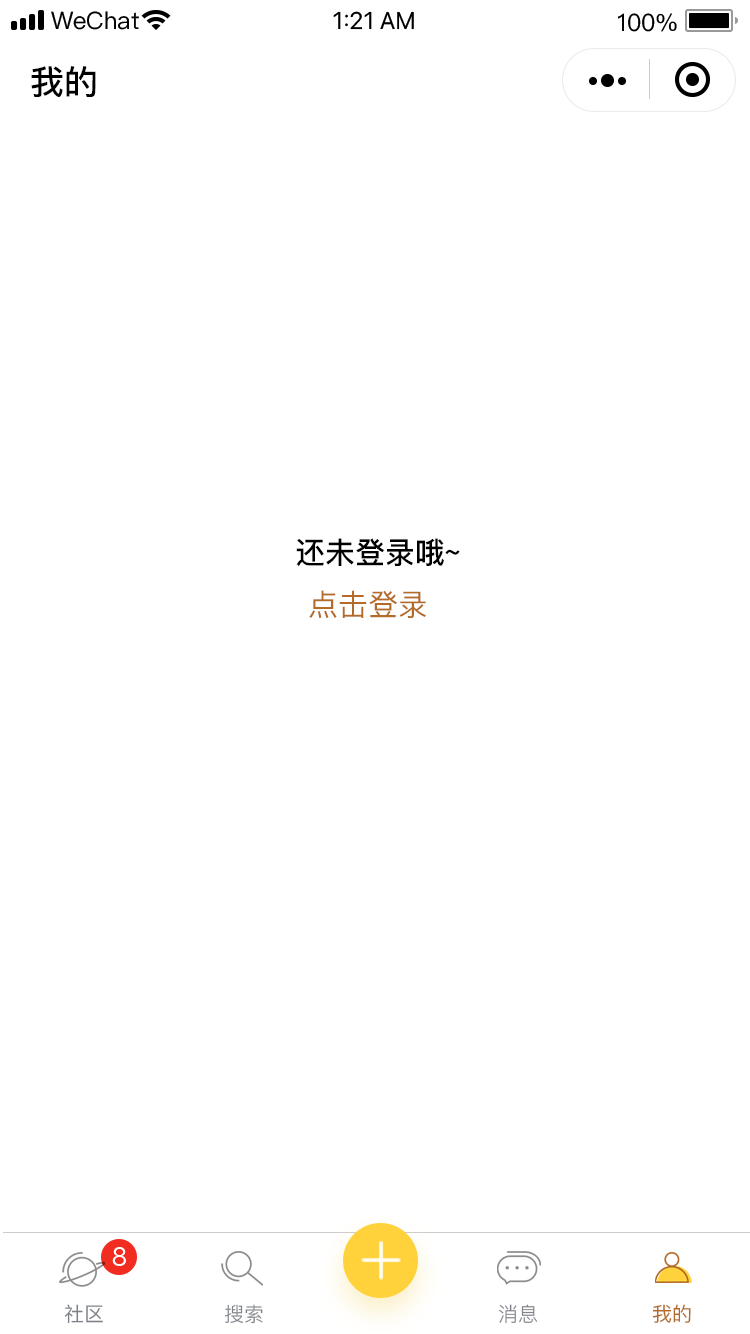
<style>
.page{position:relative;width:750px;height:1334px;background:#ffffff}
.page>*{position:absolute;margin:0}
.t1{font:34px "PingFang-SC-Bold";color:#000000}
.t2{font:30px "PingFang-SC-Bold";color:#000000}
.t3{font:30px "PingFang-SC-Medium";color:#b46b27}
.t4{font:20px "PingFang-SC-Medium";color:#7f8389}
.t5{font:20px "PingFangSC-Regular";color:#7f8389}
.t6{font:20px "PingFangSC-Medium";color:#b46b27}
</style>
<div class="page">
<p class="t1" style="left:31px;top:66px;width:65px;height:32px">我的</p>
<p class="t2" style="left:296px;top:538px;width:164px;height:29px">还未登录哦~</p>
<p class="t3" style="left:309px;top:590px;width:117px;height:28px">点击登录</p>
<p class="t4" style="left:64px;top:1304px;width:39px;height:20px">社区</p>
<p class="t5" style="left:224px;top:1304px;width:39px;height:20px">搜索</p>
<p class="t5" style="left:499px;top:1304px;width:39px;height:20px">消息</p>
<p class="t6" style="left:652px;top:1304px;width:39px;height:19px">我的</p>
</div>
